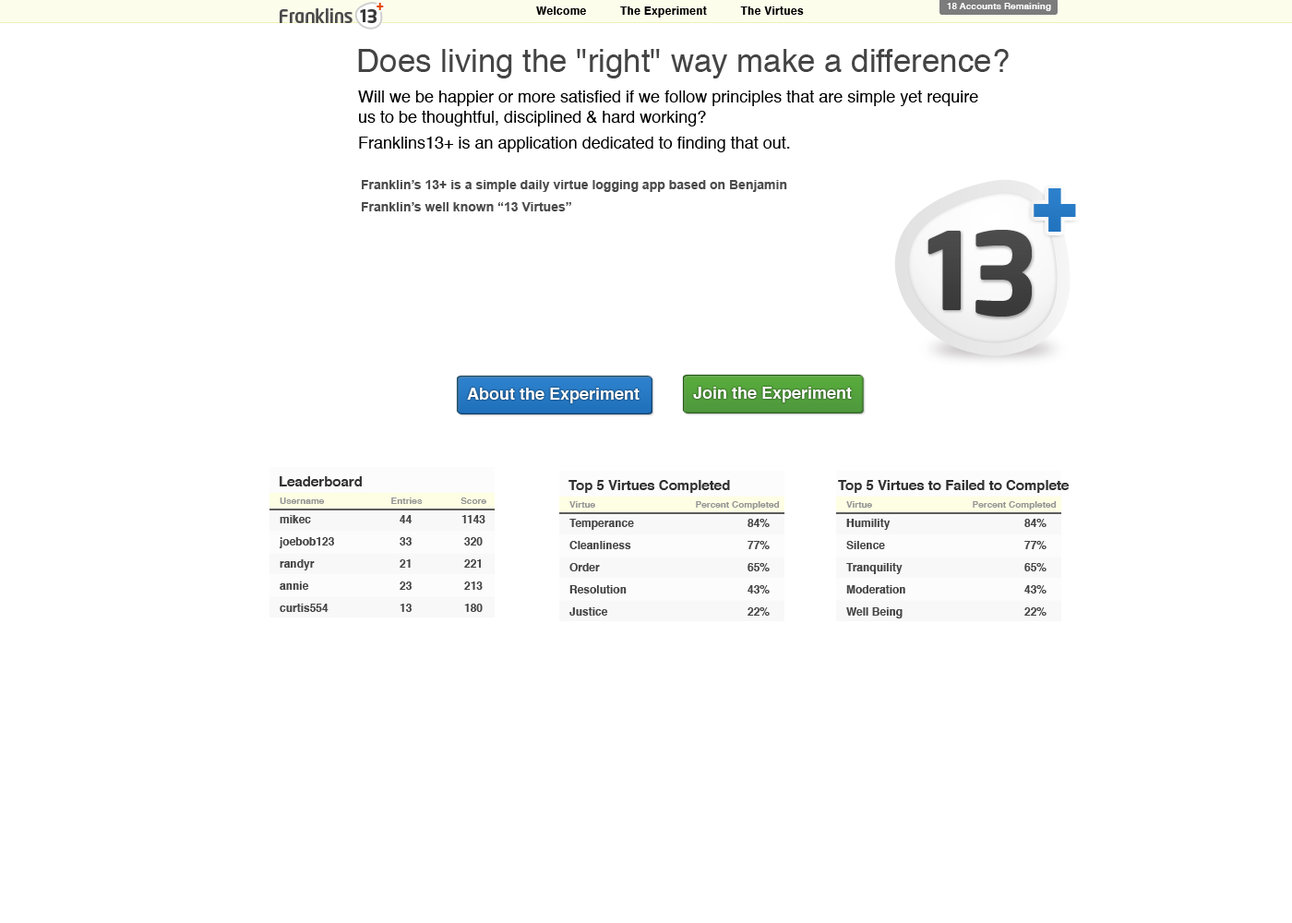
<style>
.page{position:relative;width:1292px;height:923px;background:#ffffff}
.page>*{position:absolute;margin:0}
.t1{font:12.9px "Arial-Black";letter-spacing:0.025em;color:#e44800;scale:0.96 1}
.t2{font:9.2px "Helvetica-Bold";color:#ffffff}
.t3{font:18.5px "NeoTech-Medium";letter-spacing:-0.025em;color:#4c4c4c}
.t4{font:16.9px "NeoSans-Bold";letter-spacing:-0.1em;color:#393939}
.t5{font:18.2px "NeoSans-Bold";letter-spacing:-0.1em;color:#393939}
.t6{font:11.1px "Helvetica-Bold";letter-spacing:0.025em;color:#000000}
.t7{font:32.2px "Helvetica";color:#444444}
.t8{font:16.6px "Helvetica";color:#000000}
.t9{font:16.6px/12.9px "Helvetica";color:#000000}
.t10{font:12.9px/22.1px "Arial-BoldMT";color:#4b4b4b}
.t11{font:81.5px "Arial-Black";letter-spacing:0.025em;color:#277ac5;scale:0.96 1}
.t12{font:106.5px "NeoSans-Bold";letter-spacing:-0.1em;color:#444444}
.t13{font:114.7px "NeoSans-Bold";letter-spacing:-0.1em;color:#434343}
.t14{font:16.6px "Helvetica-Bold";color:#ffffff}
.t15{font:13.8px "Helvetica-Bold";color:#313131}
.t16{font:9.2px "Helvetica-Bold";color:#959595}
.t17{font:11.1px/22.1px "Helvetica-Bold";color:#444444}
</style>
<div class="page">
<p class="t1" style="left:377px;top:3px;width:7px;height:7px">+</p>
<p class="t2" style="left:947px;top:3px;width:104px;height:8px">18 Accounts Remaining</p>
<p class="t3" style="left:280px;top:8px;width:73px;height:15px">Franklins</p>
<p class="t4" style="left:360px;top:9px;width:5px;height:13px">1</p>
<p class="t5" style="left:367px;top:9px;width:10px;height:14px">3</p>
<p class="t6" style="left:536px;top:6px;width:268px;height:12px">Welcome          The Experiment          The Virtues</p>
<p class="t7" style="left:358px;top:49px;width:651px;height:29px">Does living the "right" way make a difference?</p>
<p class="t8" style="left:358px;top:90px;width:620px;height:62px">Will we be happier or more satisfied if we follow principles that are simple yet require us to be thoughtful, disciplined &amp; hard working?<br><br><span class="t9">Franklins13+ is an application dedicated to finding that out.  <br></span><br>Franklin's 13 might help us answer that question... lets make a game of it</p>
<p class="t10" style="left:362px;top:180px;width:425px;height:31px">Franklin’s 13+ is a simple daily virtue logging app based on Benjamin Franklin’s well known “13 Virtues”</p>
<p class="t11" style="left:1034px;top:188px;width:42px;height:44px">+</p>
<p class="t12" style="left:928px;top:231px;width:33px;height:79px">1</p>
<p class="t13" style="left:976px;top:230px;width:56px;height:87px">3</p>
<p class="t14" style="left:467px;top:388px;width:173px;height:15px">About the Experiment</p>
<p class="t14" style="left:693px;top:387px;width:159px;height:15px">Join the Experiment</p>
<p class="t15" style="left:280px;top:476px;width:82px;height:10px">Leaderboard</p>
<p class="t15" style="left:569px;top:480px;width:161px;height:13px">Top 5 Virtues Completed</p>
<p class="t15" style="left:838px;top:480px;width:232px;height:13px">Top 5 Virtues to Failed to Complete</p>
<p class="t16" style="left:280px;top:497px;width:206px;height:7px">Username                          Entries               Score</p>
<p class="t16" style="left:569px;top:501px;width:211px;height:8px">Virtue                                       Percent Completed</p>
<p class="t16" style="left:846px;top:501px;width:211px;height:8px">Virtue                                       Percent Completed</p>
<p class="t17" style="left:279px;top:515px;width:55px;height:97px">mikec<br>joebob123<br>randyr<br>annie<br>curtis554</p>
<p class="t17" style="left:400px;top:515px;width:13px;height:97px">44<br>33<br>21<br>23<br>13</p>
<p class="t17" style="left:461px;top:515px;width:24px;height:97px;text-align:center">1143<br>320<br>221<br>213<br>180</p>
<p class="t17" style="left:569px;top:519px;width:65px;height:97px">Temperance<br>Cleanliness<br>Order<br>Resolution<br>Justice</p>
<p class="t17" style="left:748px;top:519px;width:22px;height:97px">84%<br>77%<br>65%<br>43%<br>22%</p>
<p class="t17" style="left:846px;top:519px;width:59px;height:99px">Humility<br>Silence<br>Tranquility<br>Moderation<br>Well Being</p>
<p class="t17" style="left:1024px;top:519px;width:23px;height:97px">84%<br>77%<br>65%<br>43%<br>22%</p>
</div>
